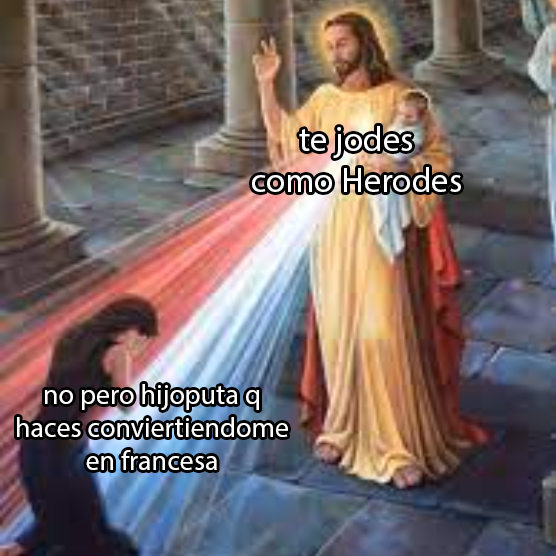
<style>
.page{position:relative;width:556px;height:556px}
.page>*{position:absolute;margin:0}
.t1{font:35px "MyriadPro-Regular";color:#ffffff}
.t2{font:28.1px "MyriadPro-Regular";color:#ffffff}
</style>
<div class="page">
<p class="t1" style="left:252px;top:126px;width:209px;height:66px;text-align:center">te jodes<br>como Herodes</p>
<p class="t2" style="left:17px;top:384px;width:271px;height:86px;text-align:center">no pero hijoputa q<br>haces conviertiendome<br>en francesa</p>
</div>
